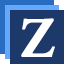
<style>
.page{position:relative;width:64px;height:64px;background:#1c3969}
.page>*{position:absolute;margin:0}
.t1{font:59px "CrimsonText-Bold";color:#ffffff}
</style>
<div class="page">
<p class="t1" style="left:21px;top:18px;width:34px;height:39px">Z</p>
</div>
